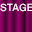
<style>
.page{position:relative;width:32px;height:32px}
.page>*{position:absolute;margin:0}
.t1{font:10px "HelveticaNeue-Medium";letter-spacing:0.01em;color:#ffffff}
</style>
<div class="page">
<p class="t1" style="left:0px;top:3px;width:33px;height:9px">STAGE</p>
</div>
